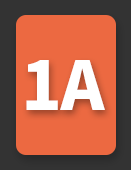
<style>
.page{position:relative;width:131px;height:170px;background:#ec6941}
.page>*{position:absolute;margin:0}
.t1{font:66.7px "SourceHanSansCN-Heavy";color:#ffffff}
</style>
<div class="page">
<p class="t1" style="left:26px;top:60px;width:79px;height:50px">1A</p>
</div>
